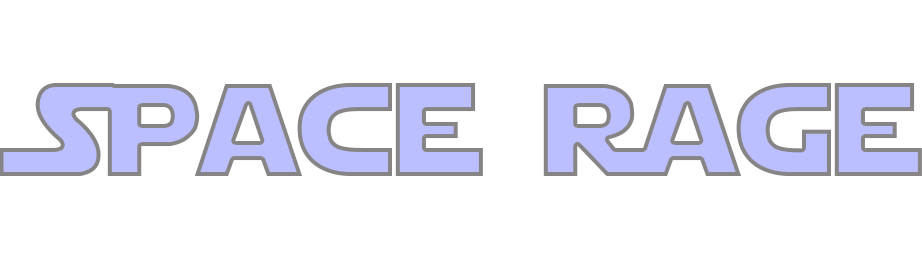
<style>
.page{position:relative;width:922px;height:260px;background:#ffffff}
.page>*{position:absolute;margin:0}
.t1{font:131px "StarJedi";color:#bbbfff}
</style>
<div class="page">
<p class="t1" style="left:0px;top:83px;width:922px;height:93px">Space Rage</p>
</div>
